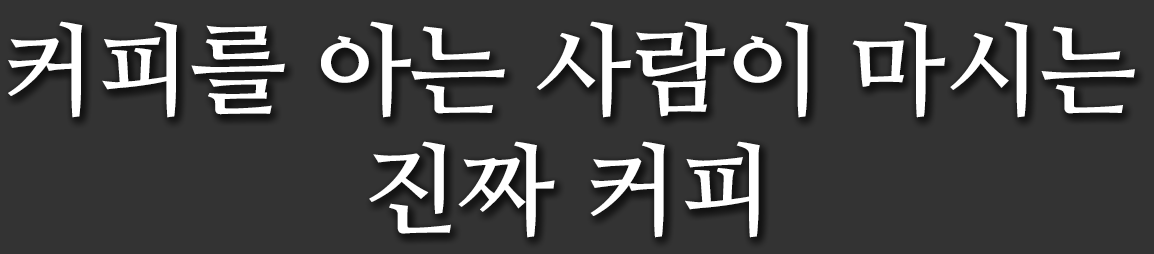
<style>
.page{position:relative;width:1154px;height:254px;background:#333333}
.page>*{position:absolute;margin:0}
.t1{font:100px "NanumMyeongjoBold";color:#ffffff}
</style>
<div class="page">
<p class="t1" style="left:8px;top:21px;width:1127px;height:217px;text-align:center">커피를 아는 사람이 마시는<br>진짜 커피</p>
</div>
